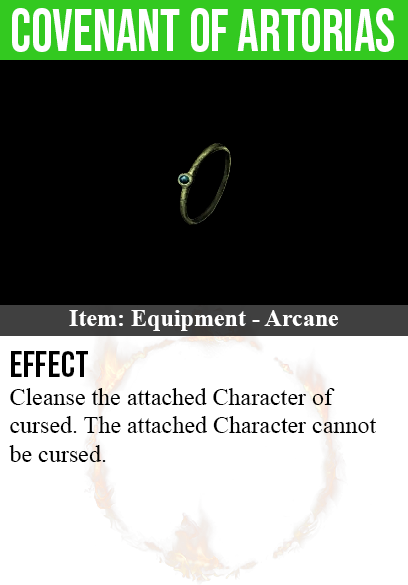
<style>
.page{position:relative;width:408px;height:585px;background:#000000}
.page>*{position:absolute;margin:0}
.t1{font:60px "BebasNeue-Regular";color:#ffffff;scale:0.9 1}
.t2{font:24px "TimesNewRomanPS-BoldMT";color:#ffffff}
.t3{font:36px "BebasNeue-Regular";color:#000000}
.t4{font:24px "TimesNewRomanPSMT";color:#000000}
</style>
<div class="page">
<p class="t1" style="left:12px;top:8px;width:382px;height:44px">covenant of artorias</p>
<p class="t2" style="left:69px;top:310px;width:269px;height:21px">Item: Equipment - Arcane</p>
<p class="t3" style="left:11px;top:351px;width:77px;height:26px">effect</p>
<p class="t4" style="left:9px;top:388px;width:367px;height:74px">Cleanse the attached Character of<br>cursed. The attached Character cannot<br>be cursed.</p>
</div>
